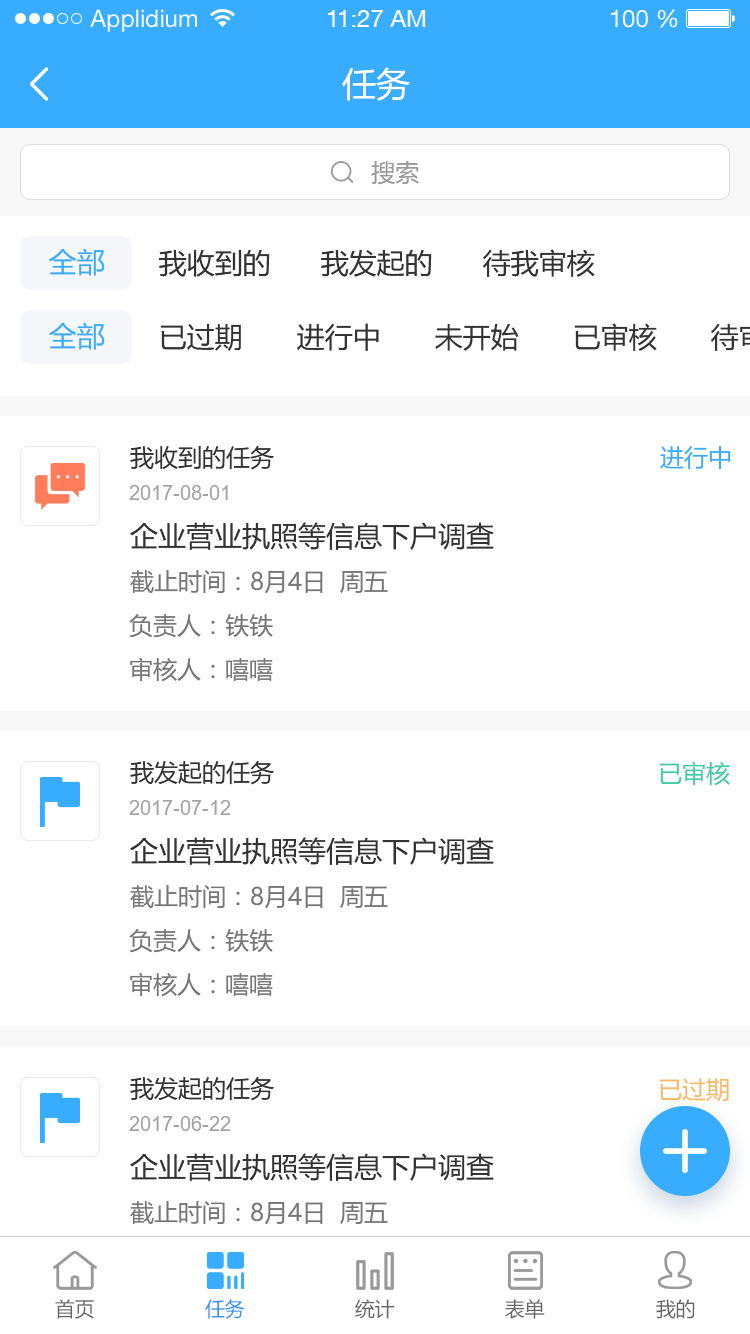
<style>
.page{position:relative;width:750px;height:1334px;background:#ffffff}
.page>*{position:absolute;margin:0}
.t1{font:24px "HelveticaNeueLTStd-Roman";color:#ffffff}
.t2{font:24px "HelveticaNeueCE-Roman";color:#ffffff}
.t3{font:34px "MicrosoftYaHei";color:#ffffff}
.t4{font:24px "MicrosoftYaHei";color:#999999}
.t5{font:28px "MicrosoftYaHei";color:#38adff}
.t6{font:28px "MicrosoftYaHei";color:#333333}
.t7{font:24px "MicrosoftYaHei";color:#333333}
.t8{font:24px "MicrosoftYaHei";color:#38adff}
.t9{font:20px "ArialMT";color:#a3a3a3}
.t10{font:24px "MicrosoftYaHei";color:#777777}
.t11{font:24px "MicrosoftYaHei";color:#3fcca7}
.t12{font:24px "MicrosoftYaHei";color:#f7b966}
.t13{font:20px "MicrosoftYaHei";color:#666666;text-transform:uppercase}
.t14{font:20px "MicrosoftYaHei";color:#2d93f9;text-transform:uppercase}
</style>
<div class="page">
<p class="t1" style="left:90px;top:9px;width:107px;height:23px">Applidium</p>
<p class="t2" style="left:328px;top:10px;width:98px;height:17px">11:27 AM</p>
<p class="t1" style="left:611px;top:9px;width:67px;height:19px">100 %</p>
<p class="t3" style="left:342px;top:67px;width:68px;height:34px">任务</p>
<p class="t4" style="left:371px;top:161px;width:48px;height:24px">搜索</p>
<p class="t5" style="left:49px;top:248px;width:56px;height:28px">全部</p>
<p class="t6" style="left:159px;top:249px;width:111px;height:28px">我收到的</p>
<p class="t6" style="left:321px;top:249px;width:111px;height:28px">我发起的</p>
<p class="t6" style="left:483px;top:249px;width:112px;height:28px">待我审核</p>
<p class="t5" style="left:49px;top:322px;width:56px;height:28px">全部</p>
<p class="t6" style="left:160px;top:323px;width:81px;height:28px">已过期</p>
<p class="t6" style="left:297px;top:323px;width:82px;height:28px">进行中</p>
<p class="t6" style="left:435px;top:323px;width:84px;height:28px">未开始</p>
<p class="t6" style="left:574px;top:323px;width:83px;height:28px">已审核</p>
<p class="t7" style="left:130px;top:445px;width:144px;height:25px">我收到的任务</p>
<p class="t8" style="left:660px;top:446px;width:71px;height:24px">进行中</p>
<p class="t9" style="left:129px;top:485px;width:99px;height:15px">2017-08-01</p>
<p class="t6" style="left:130px;top:522px;width:364px;height:28px">企业营业执照等信息下户调查</p>
<p class="t10" style="left:130px;top:570px;width:258px;height:24px">截止时间：8月4日  周五</p>
<p class="t10" style="left:129px;top:614px;width:144px;height:24px">负责人：铁铁</p>
<p class="t10" style="left:130px;top:657px;width:143px;height:25px">审核人：嘻嘻</p>
<p class="t7" style="left:130px;top:760px;width:144px;height:25px">我发起的任务</p>
<p class="t11" style="left:659px;top:761px;width:71px;height:25px">已审核</p>
<p class="t9" style="left:129px;top:800px;width:101px;height:15px">2017-07-12</p>
<p class="t6" style="left:130px;top:837px;width:364px;height:28px">企业营业执照等信息下户调查</p>
<p class="t10" style="left:130px;top:885px;width:258px;height:24px">截止时间：8月4日  周五</p>
<p class="t10" style="left:129px;top:929px;width:144px;height:24px">负责人：铁铁</p>
<p class="t10" style="left:130px;top:972px;width:143px;height:25px">审核人：嘻嘻</p>
<p class="t7" style="left:130px;top:1076px;width:144px;height:25px">我发起的任务</p>
<p class="t12" style="left:659px;top:1078px;width:70px;height:24px">已过期</p>
<p class="t9" style="left:129px;top:1116px;width:101px;height:15px">2017-06-22</p>
<p class="t6" style="left:130px;top:1153px;width:364px;height:28px">企业营业执照等信息下户调查</p>
<p class="t10" style="left:130px;top:1201px;width:258px;height:24px">截止时间：8月4日  周五</p>
<p class="t13" style="left:55px;top:1299px;width:39px;height:20px">首页</p>
<p class="t14" style="left:205px;top:1299px;width:40px;height:20px">任务</p>
<p class="t13" style="left:355px;top:1299px;width:39px;height:20px">统计</p>
<p class="t13" style="left:505px;top:1299px;width:40px;height:20px">表单</p>
<p class="t13" style="left:656px;top:1299px;width:39px;height:20px">我的</p>
</div>
